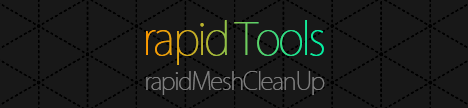
<style>
.page{position:relative;width:468px;height:108px;background:#181818}
.page>*{position:absolute;margin:0}
.t1{font:44.1px "KozGoPr6N-ExtraLight";letter-spacing:-0.06em}
.t2{font:24.1px "KozGoPr6N-ExtraLight";letter-spacing:-0.06em;color:#7f7f7f}
</style>
<div class="page">
<p class="t1" style="left:146px;top:20px;width:178px;height:45px">rapid Tools</p>
<p class="t2" style="left:146px;top:71px;width:179px;height:24px">rapidMeshCleanUp</p>
</div>
